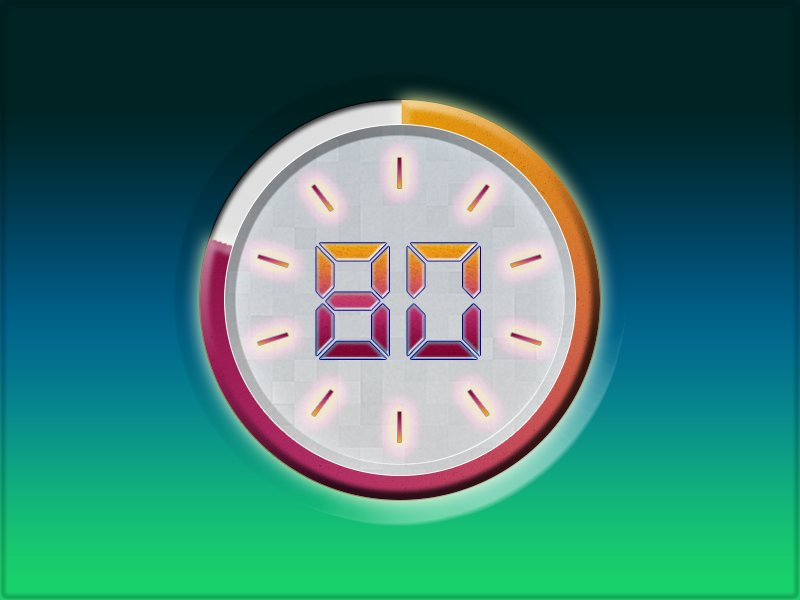
<style>
.page{position:relative;width:800px;height:600px}
.page>*{position:absolute;margin:0}
.t1{font:182.2px "LCD";text-transform:uppercase}
</style>
<div class="page">
<p class="t1" style="left:316px;top:243px;width:164px;height:116px">80</p>
</div>
